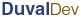
<style>
.page{position:relative;width:81px;height:17px;background:#ffffff}
.page>*{position:absolute;margin:0}
.t1{font:18px "HelveticaLTStd-Bold";color:#2e4172}
.t2{font:16px "HelveticaLTStd-Light";color:#805c15}
</style>
<div class="page">
<p class="t1" style="left:2px;top:2px;width:77px;height:13px">Duval<span class="t2">Dev</span></p>
</div>
